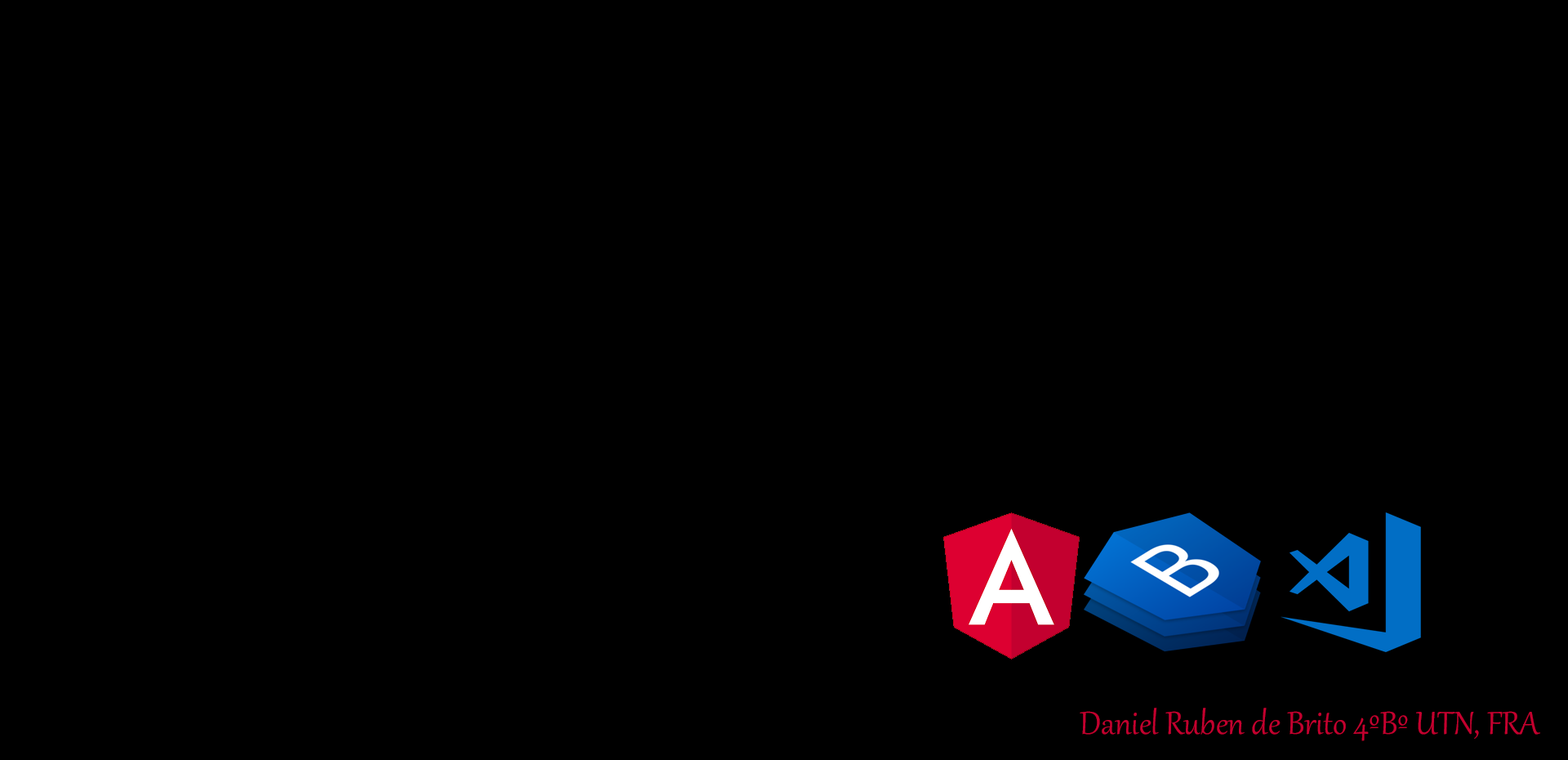
<style>
.page{position:relative;width:1568px;height:760px;background:#000000}
.page>*{position:absolute;margin:0}
.t1{font:39.2px "Gabriola";color:#c3002f}
</style>
<div class="page">
<p class="t1" style="left:1080px;top:707px;width:460px;height:34px">Daniel Ruben de Brito 4ºBº UTN, FRA</p>
</div>
